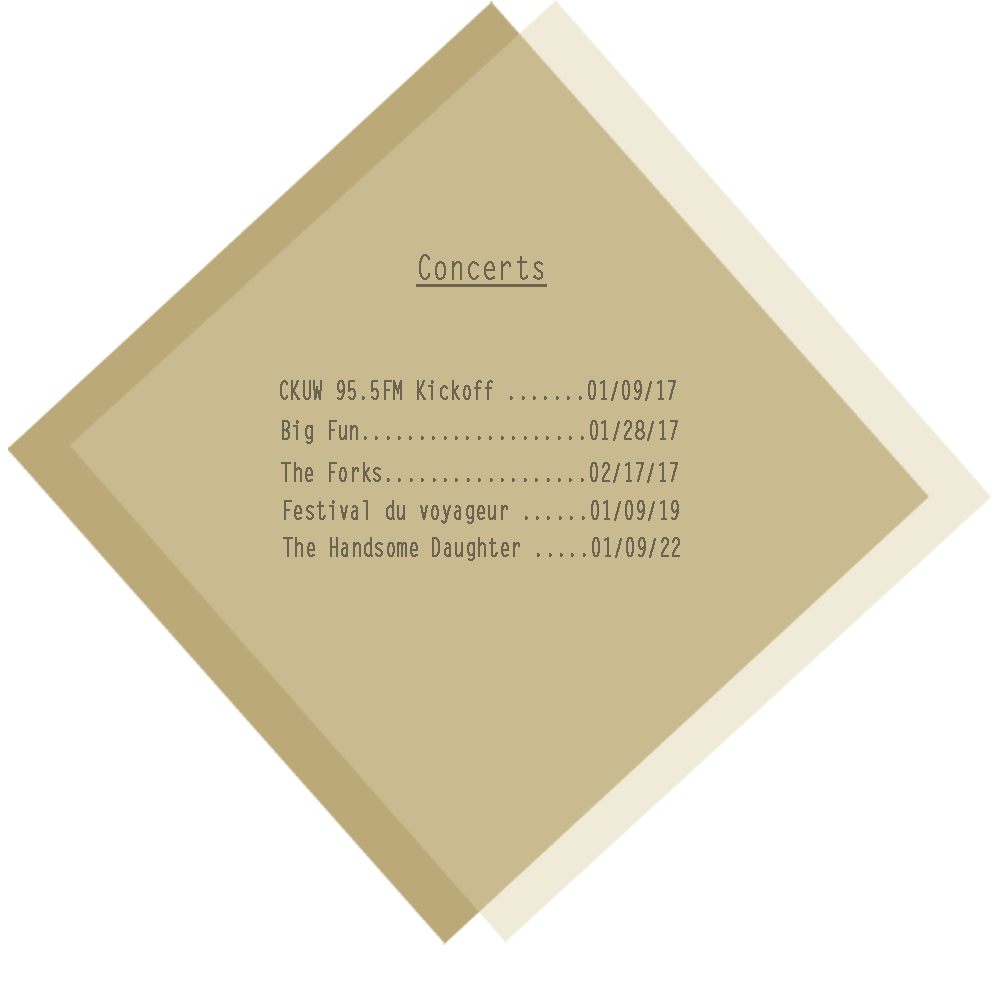
<style>
.page{position:relative;width:1000px;height:1000px;background:#ffffff}
.page>*{position:absolute;margin:0}
.t1{font:33.3px "LetterGothicStd";color:#6a6450;font-weight:bold;text-decoration:underline;scale:0.78 1}
.t2{font:25px "LetterGothicStd";color:#6a6450;font-weight:bold;scale:0.73 1}
</style>
<div class="page">
<p class="t1" style="left:416px;top:254px;width:131px;height:33px">Concerts</p>
<p class="t2" style="left:280px;top:380px;width:396px;height:21px">CKUW 95.5FM Kickoff .......01/09/17</p>
<p class="t2" style="left:282px;top:420px;width:396px;height:24px">Big Fun....................01/28/17</p>
<p class="t2" style="left:281px;top:462px;width:397px;height:21px">The Forks..................02/17/17</p>
<p class="t2" style="left:284px;top:500px;width:395px;height:24px">Festival du voyageur ......01/09/19</p>
<p class="t2" style="left:283px;top:537px;width:397px;height:24px">The Handsome Daughter .....01/09/22</p>
</div>
